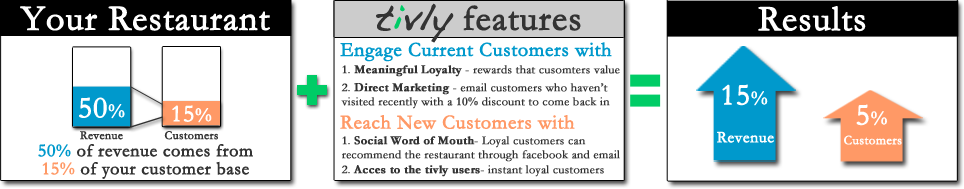
<style>
.page{position:relative;width:964px;height:189px;background:#ffffff}
.page>*{position:absolute;margin:0}
.t1{font:36px "Garamond";letter-spacing:0.01em;color:#ffffff;font-weight:bold}
.t2{font:36px "Garamond";letter-spacing:0.01em;color:#333333;font-weight:bold}
.t3{font:36px "Handwriting-Dakota";letter-spacing:0.01em;color:#333333;font-weight:bold}
.t4{font:36px "Handwriting-Dakota";letter-spacing:0.01em;color:#00cc66;font-weight:bold}
.t5{font:20px "Garamond";letter-spacing:0.01em;color:#0099cc;font-weight:bold}
.t6{font:12px "Garamond";letter-spacing:0.01em;color:#333333;font-weight:bold}
.t7{font:12px "Garamond";letter-spacing:0.01em;color:#333333;font-variant:small-caps;font-weight:bold}
.t8{font:12px "Garamond-Bold";letter-spacing:0.01em;color:#333333;font-weight:bold}
.t9{font:30px "Garamond";letter-spacing:0.01em;color:#ffffff;font-weight:bold}
.t10{font:20px "Garamond";letter-spacing:0.01em;color:#ffffff;font-weight:bold}
.t11{font:24px "Garamond";letter-spacing:0.01em;color:#ffffff;font-weight:bold}
.t12{font:20px "Garamond";letter-spacing:0.01em;color:#ff9966;font-weight:bold}
.t13{font:16px "Garamond";letter-spacing:0.01em;color:#ffffff;font-weight:bold}
.t14{font:13px "Garamond";letter-spacing:0.01em;color:#ffffff;font-weight:bold}
.t15{font:18px "Garamond";letter-spacing:0.01em;color:#333333;font-weight:bold}
.t16{font:18px "Garamond";letter-spacing:0.01em;color:#0099cc;font-weight:bold}
.t17{font:18px "Garamond";letter-spacing:0.01em;color:#ff9966;font-weight:bold}
</style>
<div class="page">
<p class="t1" style="left:20px;top:6px;width:250px;height:25px">Your Restaurant</p>
<p class="t2" style="left:376px;top:3px;width:205px;height:40px"><span class="t3">t</span><span class="t4">i</span><span class="t3">vly </span>features</p>
<p class="t1" style="left:758px;top:6px;width:108px;height:26px">Results</p>
<p class="t5" style="left:340px;top:42px;width:272px;height:20px">Engage Current Customers with</p>
<p class="t6" style="left:342px;top:65px;width:278px;height:12px"><span class="t7">1. </span><span class="t8">Meaningful Loyalty</span><span class="t7"> -</span> rewards that cusomters value</p>
<p class="t6" style="left:341px;top:83px;width:269px;height:26px"><span class="t7">2. </span><span class="t8">Direct Marketing</span><span class="t7"> -</span> email customers who haven’t visited recently with a 10% discount to come back in</p>
<p class="t9" style="left:722px;top:84px;width:46px;height:22px">15<span class="t10">%</span></p>
<p class="t9" style="left:79px;top:97px;width:46px;height:22px">50<span class="t10">%</span></p>
<p class="t11" style="left:172px;top:105px;width:40px;height:18px">15<span class="t10">%</span></p>
<p class="t9" style="left:856px;top:104px;width:31px;height:22px">5<span class="t10">%</span></p>
<p class="t12" style="left:340px;top:115px;width:235px;height:15px">Reach New Customers with</p>
<p class="t6" style="left:80px;top:131px;width:43px;height:9px">Revenue</p>
<p class="t6" style="left:164px;top:131px;width:54px;height:9px">Customers</p>
<p class="t6" style="left:342px;top:136px;width:278px;height:26px"><span class="t7">1. </span><span class="t8">Social Word of Mouth</span><span class="t7">-</span> Loyal customers can recommend the restaurant through facebook and email</p>
<p class="t13" style="left:717px;top:131px;width:57px;height:12px">Revenue</p>
<p class="t14" style="left:844px;top:135px;width:58px;height:10px">Customers</p>
<p class="t15" style="left:38px;top:144px;width:215px;height:13px"><span class="t16">50%</span> of revenue comes from</p>
<p class="t15" style="left:42px;top:161px;width:207px;height:18px"><span class="t17">15% </span>of your customer base</p>
<p class="t8" style="left:341px;top:165px;width:263px;height:12px"><span class="t7">2. </span>Acces to the tivly users<span class="t7">-</span><span class="t6"> instant loyal customers</span></p>
</div>
